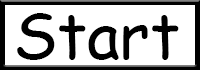
<style>
.page{position:relative;width:200px;height:70px;background:#ffffff}
.page>*{position:absolute;margin:0}
.t1{font:63.5px "ComicSansMS";color:#000000}
</style>
<div class="page">
<p class="t1" style="left:17px;top:13px;width:162px;height:47px">Start</p>
</div>
